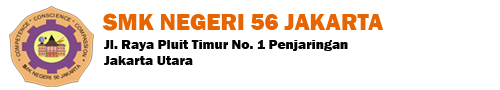
<style>
.page{position:relative;width:500px;height:90px;background:#ffffff}
.page>*{position:absolute;margin:0}
.t1{font:24px "FranklinGothic-Heavy";color:#e66500}
.t2{font:14px "FranklinGothic-Heavy";color:#060303}
</style>
<div class="page">
<p class="t1" style="left:102px;top:13px;width:282px;height:18px">SMK NEGERI 56 JAKARTA</p>
<p class="t2" style="left:104px;top:40px;width:244px;height:11px">Jl. Raya Pluit Timur No. 1 Penjaringan</p>
<p class="t2" style="left:104px;top:56px;width:89px;height:9px">Jakarta Utara</p>
</div>
